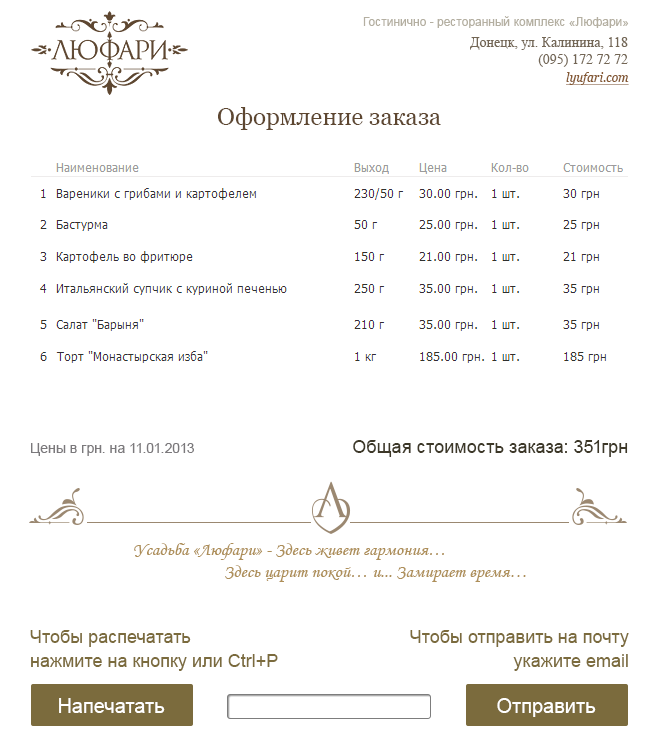
<style>
.page{position:relative;width:662px;height:746px;background:#ffffff}
.page>*{position:absolute;margin:0}
.t1{font:12px "ArialMT";color:#b4afa1}
.t2{font:14px "TimesNewRomanPSMT";color:#736655}
.t3{font:12px "Georgia-Italic";color:#855933;text-decoration:underline}
.t4{font:12px "Georgia-Italic";color:#f7e061;text-decoration:underline}
.t5{font:24px "Georgia";color:#5e4731}
.t6{font:14px "ArialMT";color:#7b797c}
.t7{font:18px "ArialMT";color:#3d3828}
.t8{font:18px "MonotypeCorsiva";color:#ae8f59}
.t9{font:18px/24px "ArialMT";color:#7b6b3d}
.t10{font:20px "ArialMT";color:#ffffff}
</style>
<div class="page">
<p class="t1" style="left:363px;top:16px;width:266px;height:12px">Гостинично - ресторанный комплекс «Люфари»</p>
<p class="t2" style="left:470px;top:37px;width:158px;height:30px;text-align:right">Донецк, ул. Калинина, 118<br>(095) 172 72 72</p>
<p class="t3" style="left:566px;top:72px;width:63px;height:13px"><span class="t4"><br></span>lyufari.com</p>
<p class="t5" style="left:218px;top:107px;width:223px;height:23px">Оформление заказа</p>
<p class="t6" style="left:31px;top:443px;width:163px;height:13px">Цены в грн. на 11.01.2013</p>
<p class="t7" style="left:353px;top:440px;width:275px;height:17px">Общая стоимость заказа: 351грн</p>
<p class="t8" style="left:134px;top:543px;width:392px;height:39px">Усадьба «Люфари» - Здесь живет гармония…<br>                       Здесь царит покой… и... Замирает время…</p>
<p class="t9" style="left:30px;top:630px;width:248px;height:41px">Чтобы распечатать<br>нажмите на кнопку или Ctrl+P</p>
<p class="t9" style="left:410px;top:630px;width:219px;height:41px;text-align:right">Чтобы отправить на почту<br>укажите email</p>
<p class="t10" style="left:59px;top:698px;width:106px;height:15px">Напечатать</p>
<p class="t10" style="left:497px;top:698px;width:99px;height:19px">Отправить</p>
</div>
